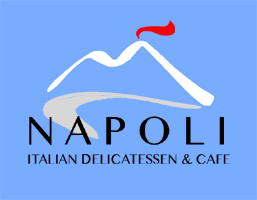
<style>
.page{position:relative;width:257px;height:200px;background:#77acff}
.page>*{position:absolute;margin:0}
.t1{font:39.2px "MalayalamMN";color:#040000}
.t2{font:13.1px "MalayalamMN";color:#040000}
</style>
<div class="page">
<p class="t1" style="left:29px;top:116px;width:195px;height:29px">N A P O L I</p>
<p class="t2" style="left:28px;top:154px;width:202px;height:10px">ITALIAN DELICATESSEN &amp; CAFE</p>
</div>
